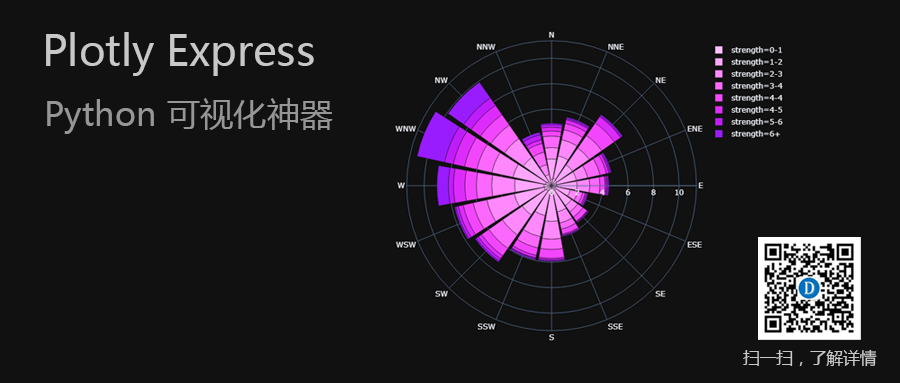
<style>
.page{position:relative;width:900px;height:383px;background:#111111}
.page>*{position:absolute;margin:0}
.t1{font:41.7px "MicrosoftYaHei";color:#c8c8c8}
.t2{font:33.3px "MicrosoftYaHei";color:#969696}
.t3{font:16.7px "MicrosoftYaHei";color:#c8c8c8}
</style>
<div class="page">
<p class="t1" style="left:46px;top:32px;width:268px;height:44px">Plotly Express</p>
<p class="t2" style="left:47px;top:98px;width:286px;height:36px">Python 可视化神器</p>
<p class="t3" style="left:743px;top:349px;width:134px;height:18px">扫一扫，了解详情</p>
</div>
